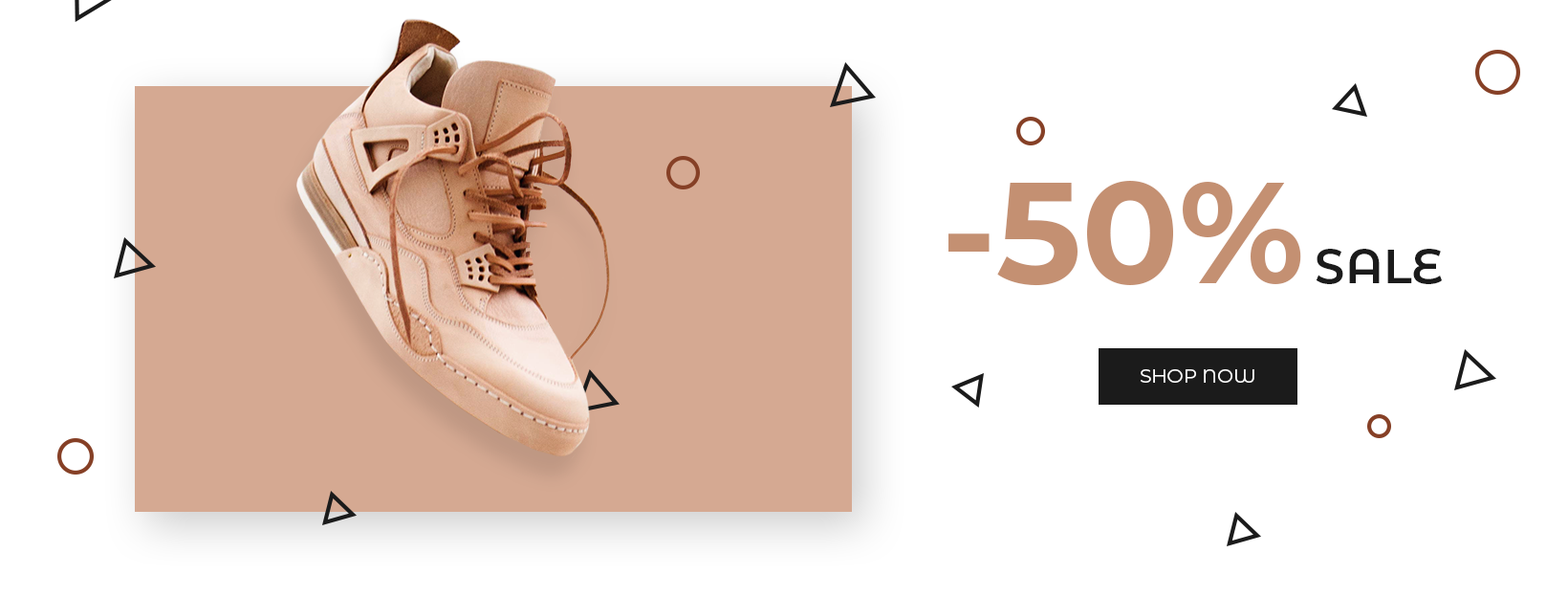
<style>
.page{position:relative;width:1568px;height:597px;background:#ffffff}
.page>*{position:absolute;margin:0}
.t1{font:143.4px "MontserratAlternates-Bold";color:#c49072}
.t2{font:47.8px "MontserratAlternates-SemiBold";color:#1b1b1b}
.t3{font:19.1px "MontserratAlternates-Regular";color:#ffffff}
</style>
<div class="page">
<p class="t1" style="left:948px;top:181px;width:353px;height:105px">-50%</p>
<p class="t2" style="left:1316px;top:249px;width:127px;height:35px">SALE</p>
<p class="t3" style="left:1141px;top:369px;width:113px;height:13px">SHOP NOW</p>
</div>
